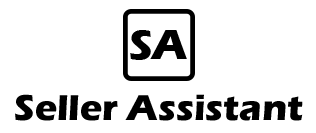
<style>
.page{position:relative;width:316px;height:133px;background:#ffffff}
.page>*{position:absolute;margin:0}
.t1{font:42.7px "ErasITC-Bold";color:#000000}
.t2{font:37.3px "ErasITC-Bold";color:#000000}
</style>
<div class="page">
<p class="t1" style="left:130px;top:30px;width:57px;height:30px">SA</p>
<p class="t2" style="left:15px;top:94px;width:288px;height:27px">Seller Assistant</p>
</div>
